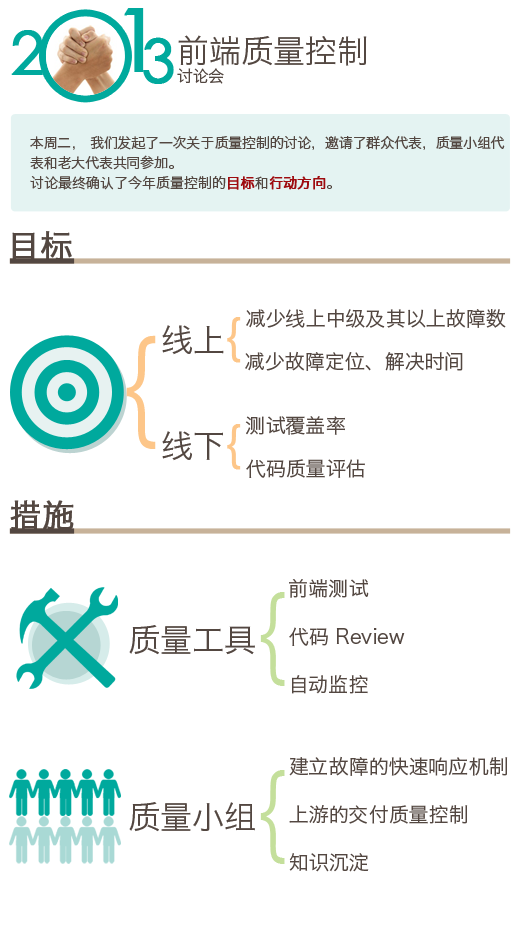
<style>
.page{position:relative;width:520px;height:950px;background:#ffffff}
.page>*{position:absolute;margin:0}
.t1{font:88px "STHeitiSC-Light";color:#00a99d;font-weight:bold}
.t2{font:60px "STHeitiSC-Light";color:#00a99d;font-weight:bold}
.t3{font:32px "HiraginoSansGB-W3";color:#534741}
.t4{font:16px "HiraginoSansGB-W3";color:#534741}
.t5{font:14px/20px "HiraginoSansGB-W3";color:#534741}
.t6{font:14px/20px "HiraginoSansGB-W3";color:#9e0b0f;font-weight:bold}
.t7{font:32px "HiraginoSansGB-W3";color:#534741;font-weight:bold}
.t8{font:48px "AbadiMT-CondensedLight";color:#fdc689;font-weight:bold}
.t9{font:20px "HiraginoSansGB-W3";color:#534741}
.t10{font:120px "AbadiMT-CondensedLight";color:#fdc689}
.t11{font:100px "AbadiMT-CondensedLight";color:#c4df9b}
</style>
<div class="page">
<p class="t1" style="left:124px;top:8px;width:20px;height:64px">1</p>
<p class="t2" style="left:11px;top:30px;width:32px;height:45px">2</p>
<p class="t2" style="left:143px;top:37px;width:31px;height:47px">3</p>
<p class="t3" style="left:177px;top:35px;width:190px;height:49px">前端质量控制<br><span class="t4">讨论会</span></p>
<p class="t5" style="left:30px;top:136px;width:475px;height:54px">本周二， 我们发起了一次关于质量控制的讨论，邀请了群众代表，质量小组代表和老大代表共同参加。<br>讨论最终确认了今年质量控制的<span class="t6">目标</span>和<span class="t6">行动方向</span>。</p>
<p class="t7" style="left:12px;top:231px;width:60px;height:31px">目标</p>
<p class="t8" style="left:227px;top:317px;width:14px;height:46px">{</p>
<p class="t9" style="left:246px;top:308px;width:260px;height:20px">减少线上中级及其以上故障数</p>
<p class="t3" style="left:162px;top:325px;width:62px;height:30px">线上</p>
<p class="t10" style="left:126px;top:335px;width:30px;height:114px">{</p>
<p class="t9" style="left:245px;top:351px;width:218px;height:20px">减少故障定位、解决时间</p>
<p class="t8" style="left:227px;top:424px;width:14px;height:46px">{</p>
<p class="t9" style="left:245px;top:416px;width:100px;height:19px">测试覆盖率</p>
<p class="t3" style="left:162px;top:431px;width:61px;height:30px">线下</p>
<p class="t9" style="left:246px;top:459px;width:119px;height:19px">代码质量评估</p>
<p class="t7" style="left:10px;top:500px;width:64px;height:30px">措施</p>
<p class="t9" style="left:289px;top:579px;width:116px;height:115px">前端测试<br><br>代码 Review<br><br>自动监控</p>
<p class="t11" style="left:260px;top:592px;width:25px;height:94px">{</p>
<p class="t3" style="left:129px;top:625px;width:126px;height:30px">质量工具</p>
<p class="t9" style="left:289px;top:756px;width:219px;height:116px">建立故障的快速响应机制<br><br>上游的交付质量控制<br><br>知识沉淀</p>
<p class="t11" style="left:260px;top:770px;width:25px;height:94px">{</p>
<p class="t3" style="left:129px;top:802px;width:126px;height:30px">质量小组</p>
</div>
